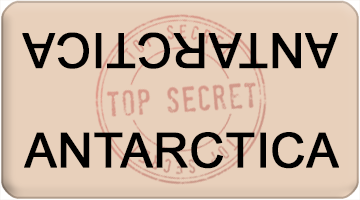
<style>
.page{position:relative;width:360px;height:200px;background:#e8d0bb}
.page>*{position:absolute;margin:0}
.t1{font:48px "ArialMT";color:#000000;font-weight:bold}
</style>
<div class="page">
<p class="t1" style="left:22px;top:32px;width:316px;height:37px;rotate:180deg">ANTARCTICA</p>
<p class="t1" style="left:24px;top:132px;width:315px;height:37px">ANTARCTICA</p>
</div>
